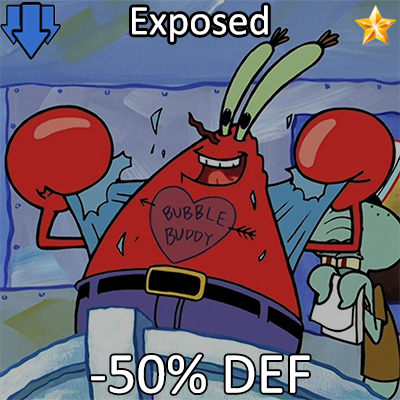
<style>
.page{position:relative;width:400px;height:400px}
.page>*{position:absolute;margin:0}
.t1{font:72px "Calibri";color:#ffffff}
.t2{font:100px "Calibri";color:#ffffff}
</style>
<div class="page">
<p class="t1" style="left:132px;top:5px;width:136px;height:37px">Exposed</p>
<p class="t2" style="left:91px;top:354px;width:219px;height:40px">-50% DEF</p>
</div>
